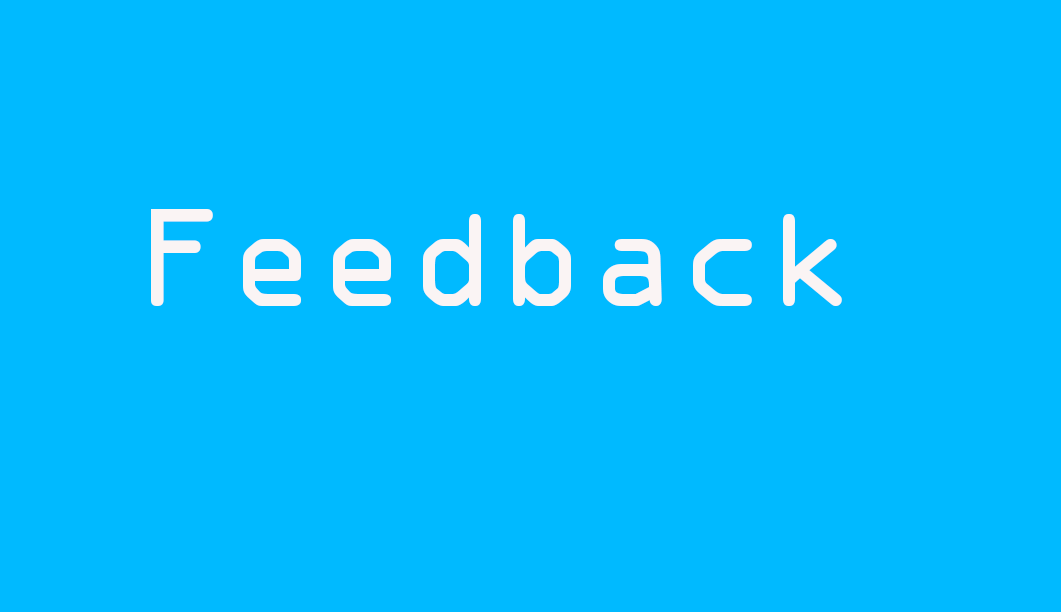
<style>
.page{position:relative;width:1061px;height:612px;background:#00baff}
.page>*{position:absolute;margin:0}
.t1{font:125px "OCRAStd";color:#faf4f4}
</style>
<div class="page">
<p class="t1" style="left:151px;top:209px;width:691px;height:97px">Feedback</p>
</div>
